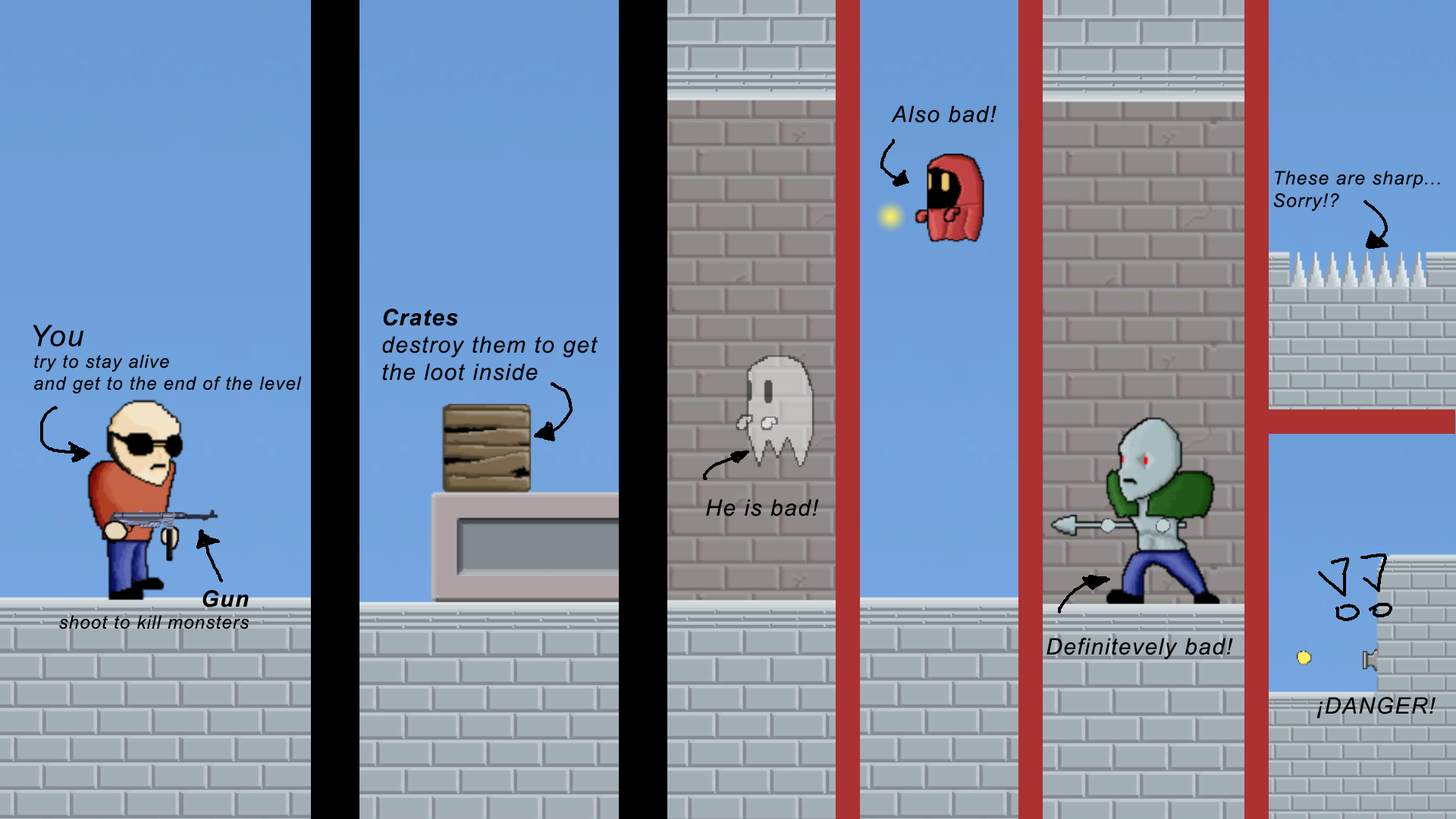
<style>
.page{position:relative;width:1456px;height:819px}
.page>*{position:absolute;margin:0}
.t1{font:22.7px "Arial-ItalicMT";letter-spacing:0.05em;color:#000000}
.t2{font:18.8px "Arial-ItalicMT";letter-spacing:0.05em;color:#000000}
.t3{font:22.7px "Arial-BoldItalicMT";letter-spacing:0.05em;color:#000000}
.t4{font:29.5px "Arial-ItalicMT";letter-spacing:0.05em;color:#000000}
.t5{font:18.2px "Arial-ItalicMT";letter-spacing:0.05em;color:#000000}
</style>
<div class="page">
<p class="t1" style="left:891px;top:105px;width:105px;height:18px">Also bad!</p>
<p class="t2" style="left:1273px;top:171px;width:167px;height:41px">These are sharp...<br>Sorry!?</p>
<p class="t1" style="left:382px;top:309px;width:216px;height:72px"><span class="t3">Crates<br></span>destroy them to get<br>the loot inside</p>
<p class="t4" style="left:33px;top:325px;width:51px;height:22px">You</p>
<p class="t5" style="left:34px;top:354px;width:268px;height:40px">try to stay alive<br>and get to the end of the level</p>
<p class="t1" style="left:706px;top:499px;width:113px;height:17px">He is bad!</p>
<p class="t5" style="left:59px;top:590px;width:190px;height:39px;text-align:right"><span class="t3">Gun<br></span>shoot to kill monsters</p>
<p class="t1" style="left:1046px;top:638px;width:187px;height:22px">Definitevely bad!</p>
<p class="t1" style="left:1316px;top:697px;width:120px;height:21px">¡DANGER!</p>
</div>
